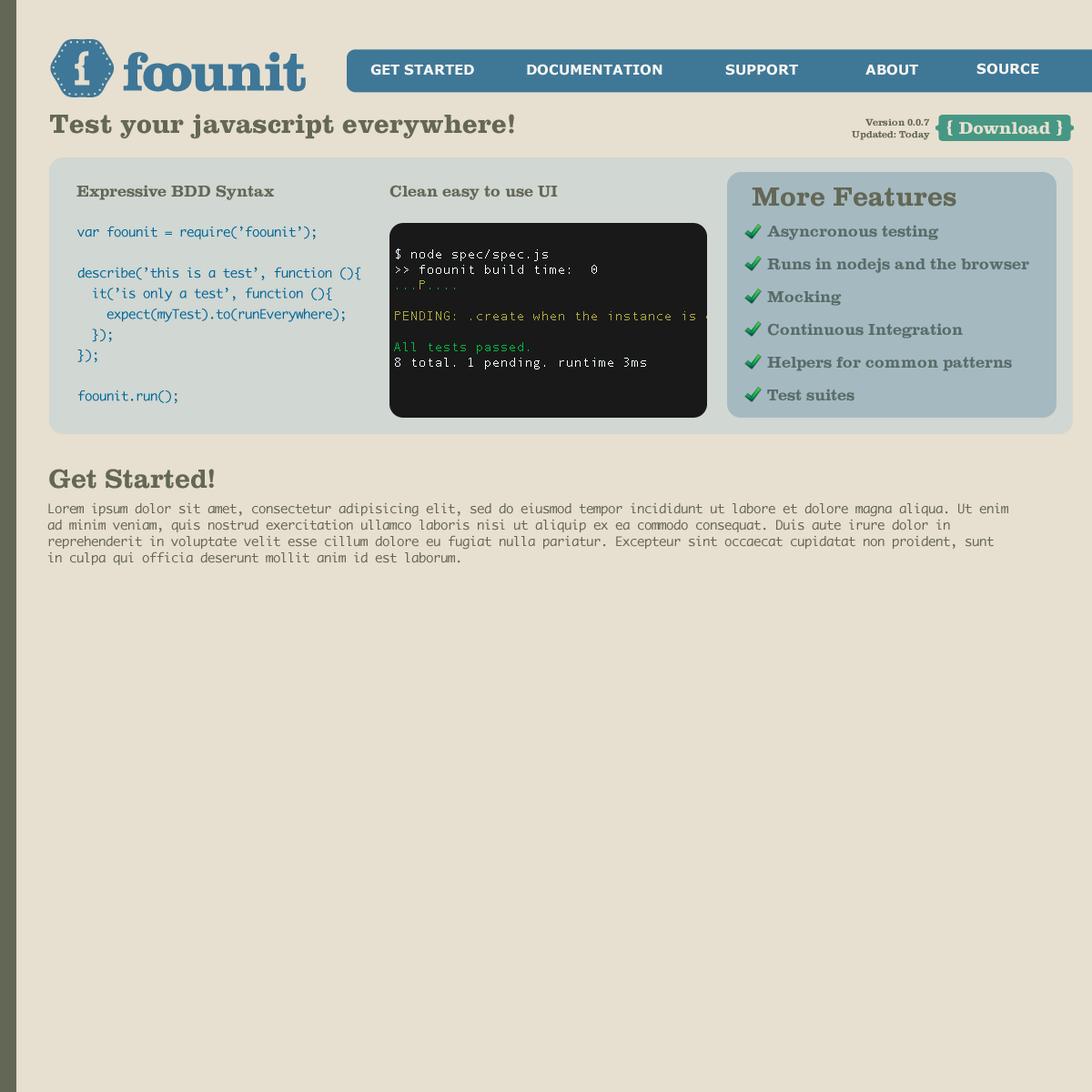
<style>
.page{position:relative;width:1092px;height:1092px;background:#e7dfd0}
.page>*{position:absolute;margin:0}
.t1{font:13.6px "Verdana-Bold";color:#f7f5f2}
.t2{font:27.3px "Clarendon-Bold";color:#636756}
.t3{font:10px "Clarendon";color:#636756}
.t4{font:16.4px "Clarendon";color:#636756}
.t5{font:27.3px "Clarendon";color:#636756}
.t6{font:12.7px/20.5px "Monaco";color:#006699}
.t7{font:16.4px/32.8px "Clarendon";color:#636756}
.t8{font:12.7px/16.4px "Monaco";color:#636756}
</style>
<div class="page">
<p class="t1" style="left:370px;top:64px;width:104px;height:12px">GET STARTED</p>
<p class="t1" style="left:527px;top:64px;width:135px;height:12px">DOCUMENTATION</p>
<p class="t1" style="left:725px;top:64px;width:73px;height:12px">SUPPORT</p>
<p class="t1" style="left:865px;top:64px;width:53px;height:12px">ABOUT</p>
<p class="t1" style="left:976px;top:63px;width:63px;height:12px">SOURCE</p>
<p class="t2" style="left:50px;top:114px;width:464px;height:25px">Test your javascript everywhere!</p>
<p class="t3" style="left:852px;top:118px;width:78px;height:22px;text-align:right">Version 0.0.7<br>Updated: Today</p>
<p class="t4" style="left:76px;top:185px;width:198px;height:15px">Expressive BDD Syntax</p>
<p class="t4" style="left:389px;top:185px;width:169px;height:15px">Clean easy to use UI</p>
<p class="t5" style="left:752px;top:187px;width:204px;height:20px">More Features</p>
<p class="t6" style="left:77px;top:226px;width:284px;height:178px">var foounit = require(’foounit’);<br><br>describe(’this is a test’, function (){<br>  it(’is only a test’, function (){<br>    expect(myTest).to(runEverywhere);<br>  });<br>});<br><br>foounit.run();</p>
<p class="t7" style="left:767px;top:225px;width:262px;height:176px">Asyncronous testing<br>Runs in nodejs and the browser<br>Mocking<br>Continuous Integration<br>Helpers for common patterns<br>Test suites</p>
<p class="t5" style="left:49px;top:469px;width:165px;height:20px">Get Started!</p>
<p class="t8" style="left:47px;top:502px;width:961px;height:63px">Lorem ipsum dolor sit amet, consectetur adipisicing elit, sed do eiusmod tempor incididunt ut labore et dolore magna aliqua. Ut enim<br>ad minim veniam, quis nostrud exercitation ullamco laboris nisi ut aliquip ex ea commodo consequat. Duis aute irure dolor in<br>reprehenderit in voluptate velit esse cillum dolore eu fugiat nulla pariatur. Excepteur sint occaecat cupidatat non proident, sunt<br>in culpa qui officia deserunt mollit anim id est laborum.</p>
</div>
